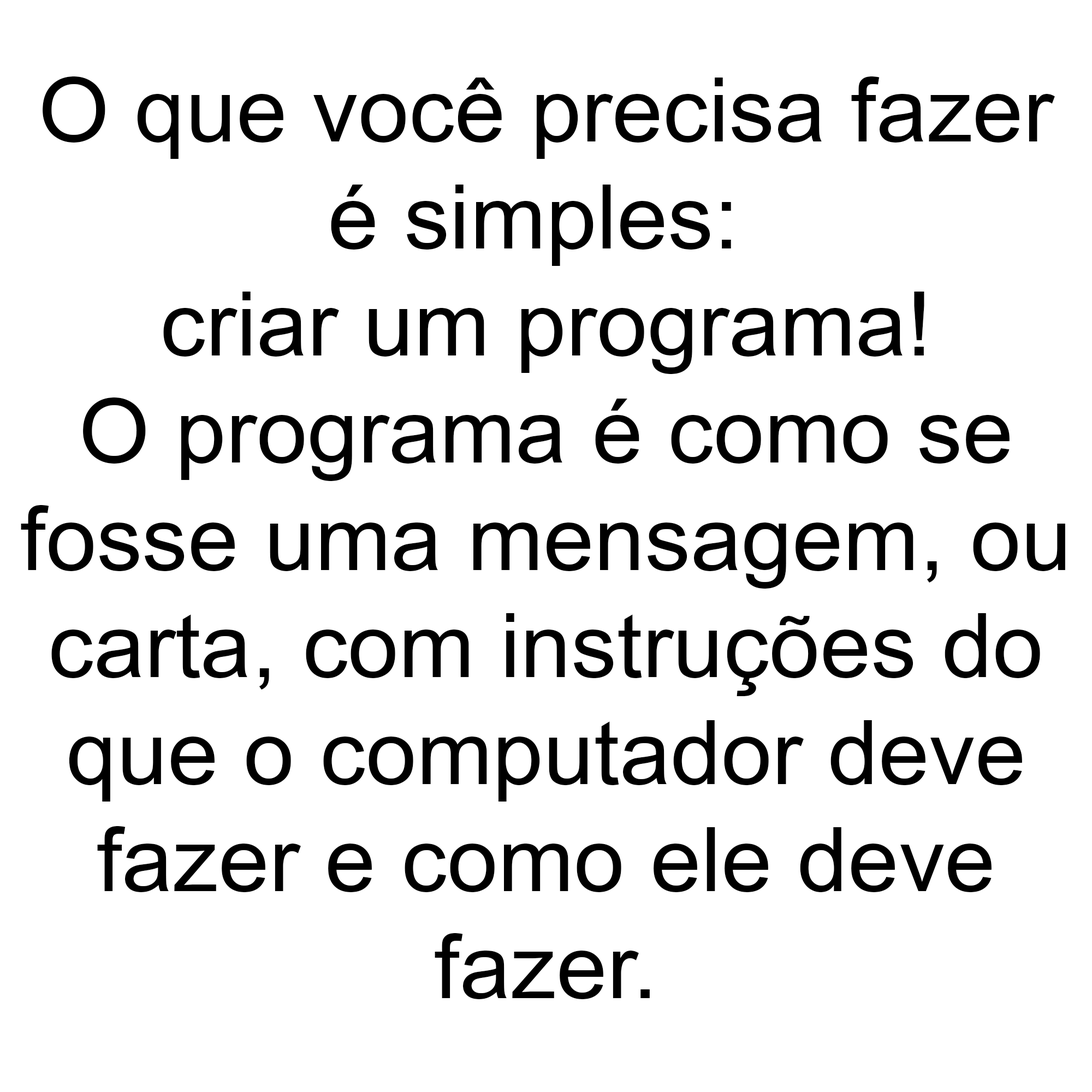
<style>
.page{position:relative;width:1092px;height:1092px;background:#ffffff}
.page>*{position:absolute;margin:0}
.t1{font:89.2px "ArialMT";color:#000000}
</style>
<div class="page">
<p class="t1" style="left:21px;top:76px;width:1044px;height:923px;text-align:center">O que você precisa fazer<br>é simples: <br>criar um programa!<br>O programa é como se<br>fosse uma mensagem, ou<br>carta, com instruções do<br>que o computador deve<br>fazer e como ele deve<br>fazer.</p>
</div>
